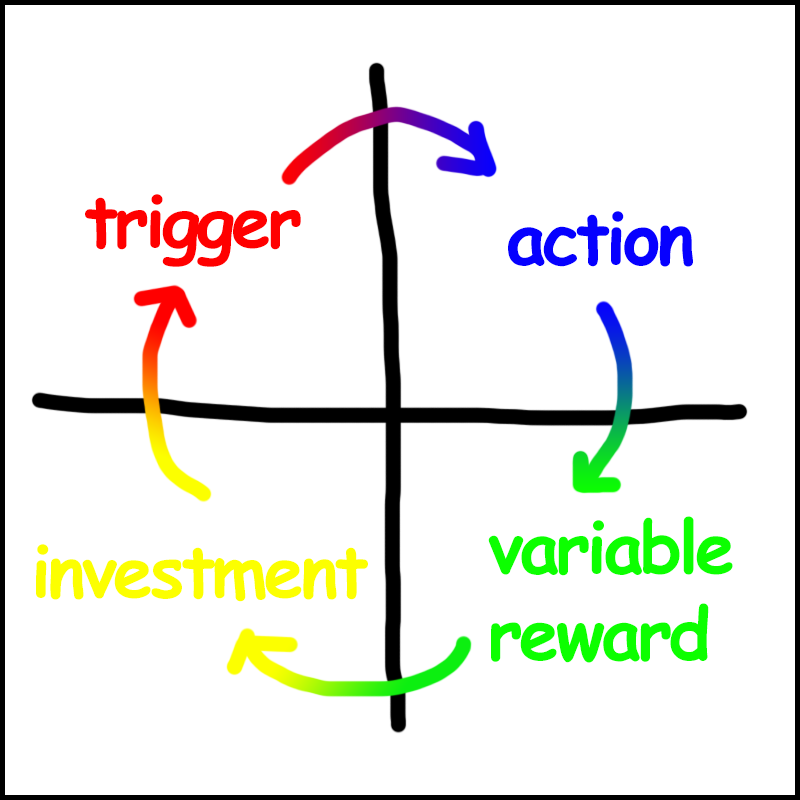
<style>
.page{position:relative;width:800px;height:800px;background:#ffffff}
.page>*{position:absolute;margin:0}
.t1{font:72px "ComicSansMS-Bold";letter-spacing:-0.05em;color:#ff0000}
.t2{font:72px "ComicSansMS-Bold";letter-spacing:-0.05em;color:#0600ff}
.t3{font:72px "ComicSansMS-Bold";letter-spacing:-0.05em;color:#0cff00}
.t4{font:72px "ComicSansMS-Bold";letter-spacing:-0.05em;color:#fcff00}
</style>
<div class="page">
<p class="t1" style="left:85px;top:194px;width:216px;height:73px">trigger</p>
<p class="t2" style="left:508px;top:211px;width:185px;height:56px">action</p>
<p class="t3" style="left:488px;top:516px;width:245px;height:147px">variable<br>reward</p>
<p class="t4" style="left:36px;top:544px;width:332px;height:58px">investment</p>
</div>
